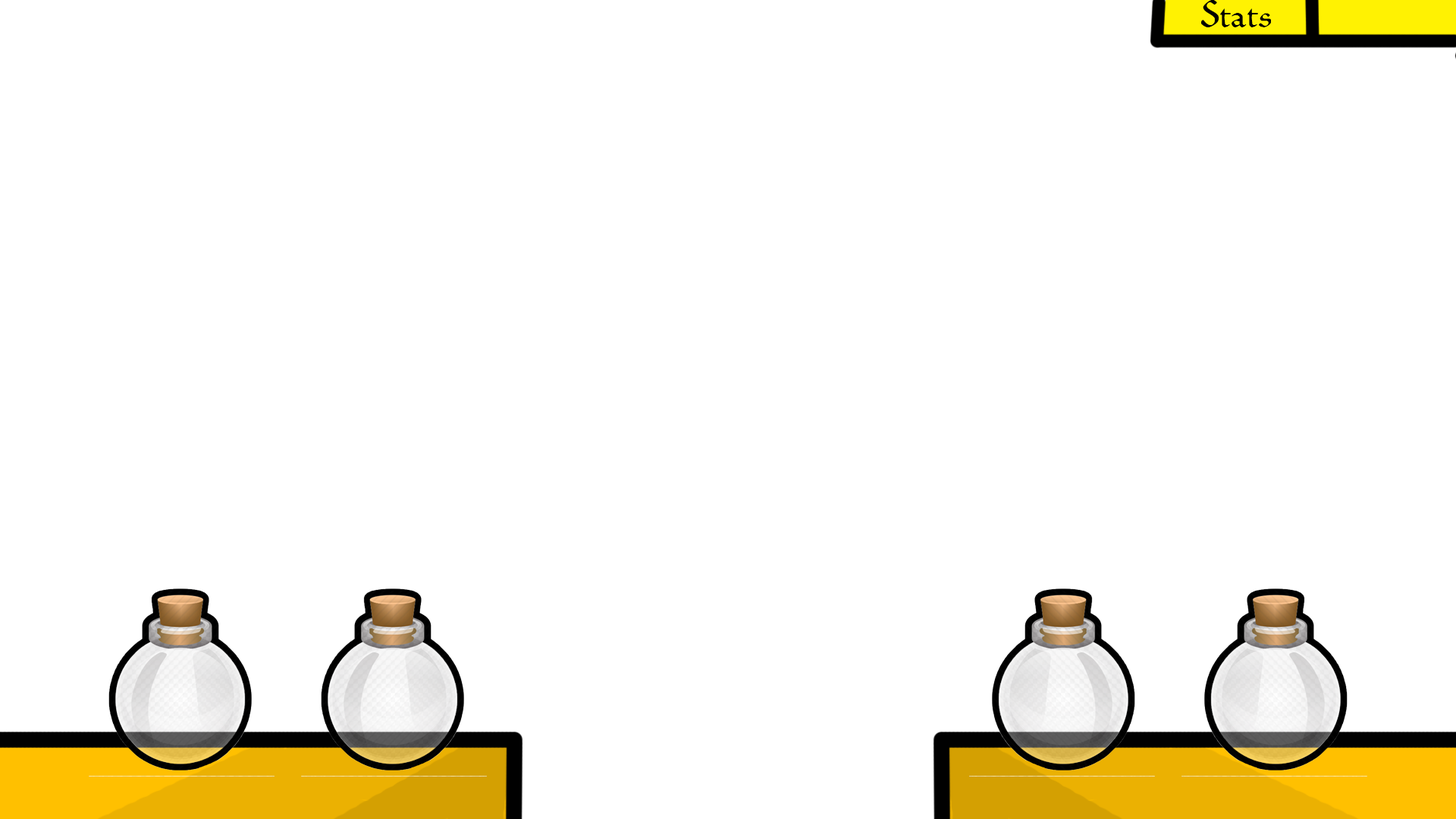
<style>
.page{position:relative;width:1456px;height:819px;background:#ffffff}
.page>*{position:absolute;margin:0}
.t1{font:27.3px "Romeodn";color:#000000}
</style>
<div class="page">
<p class="t1" style="left:1201px;top:0px;width:70px;height:27px">Stats</p>
</div>
